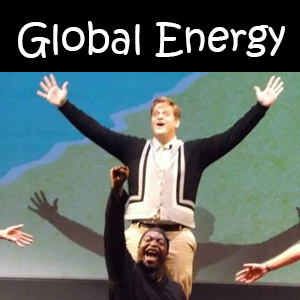
<style>
.page{position:relative;width:300px;height:300px}
.page>*{position:absolute;margin:0}
.t1{font:40px "KristenITC-Regular";color:#ffffff}
</style>
<div class="page">
<p class="t1" style="left:18px;top:21px;width:267px;height:37px">Global Energy</p>
</div>
